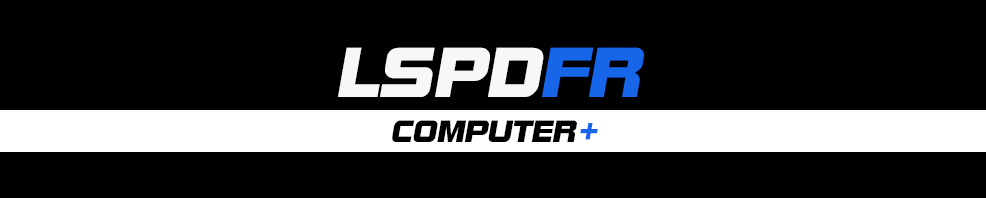
<style>
.page{position:relative;width:986px;height:198px;background:#000000}
.page>*{position:absolute;margin:0}
.t1{font:68.4px "BoltsSF";color:#f8f7f7;font-style:italic}
.t2{font:68.4px "BoltsSF";color:#1766ea;font-style:italic}
.t3{font:30px "BoltsSF";color:#000000;font-style:italic}
.t4{font:30px "BoltsSF";color:#1766ea;font-style:italic}
</style>
<div class="page">
<p class="t1" style="left:338px;top:47px;width:306px;height:50px">LSPD<span class="t2">FR</span></p>
<p class="t3" style="left:392px;top:120px;width:206px;height:22px">COMPUTER<span class="t4">+</span></p>
</div>
